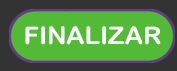
<style>
.page{position:relative;width:177px;height:71px;background:#52ba36}
.page>*{position:absolute;margin:0}
.t1{font:24.3px "ArialRoundedMTBold";color:#ffffff;scale:1.06 1}
</style>
<div class="page">
<p class="t1" style="left:25px;top:26px;width:136px;height:19px">FINALIZAR</p>
</div>
